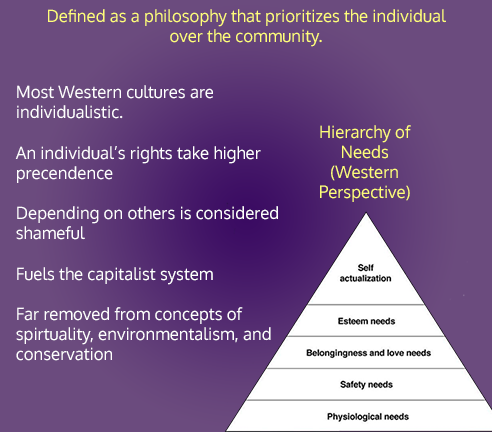
<style>
.page{position:relative;width:492px;height:432px;background:#6b4b7e}
.page>*{position:absolute;margin:0}
.t1{font:16.8px "Oxygen-Regular";color:#fffd79}
.t2{font:16.8px "Oxygen-Regular";color:#ffffff}
</style>
<div class="page">
<p class="t1" style="left:48px;top:9px;width:398px;height:38px;text-align:center">Defined as a philosophy that prioritizes the individual over the community.</p>
<p class="t2" style="left:15px;top:85px;width:263px;height:276px">Most Western cultures are individualistic.<br><br>An individual’s rights take higher precendence<br><br>Depending on others is considered shameful <br><br>Fuels the capitalist system<br><br>Far removed from concepts of spirtuality, environmentalism, and conservation</p>
<p class="t1" style="left:320px;top:125px;width:91px;height:77px;text-align:center">Hierarchy of Needs<br>(Western Perspective)</p>
</div>
